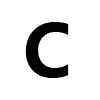
<style>
.page{position:relative;width:100px;height:100px;background:#ffffff}
.page>*{position:absolute;margin:0}
.t1{font:72px "MicrosoftYaHei-Bold";color:#000000}
</style>
<div class="page">
<p class="t1" style="left:25px;top:22px;width:44px;height:56px">C</p>
</div>
